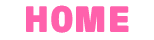
<style>
.page{position:relative;width:154px;height:40px;background:#ffffff}
.page>*{position:absolute;margin:0}
.t1{font:30px "YoonMeolijeongche2SN";letter-spacing:0.1em;color:#ff61ac}
</style>
<div class="page">
<p class="t1" style="left:26px;top:5px;width:103px;height:28px">HOME</p>
</div>
